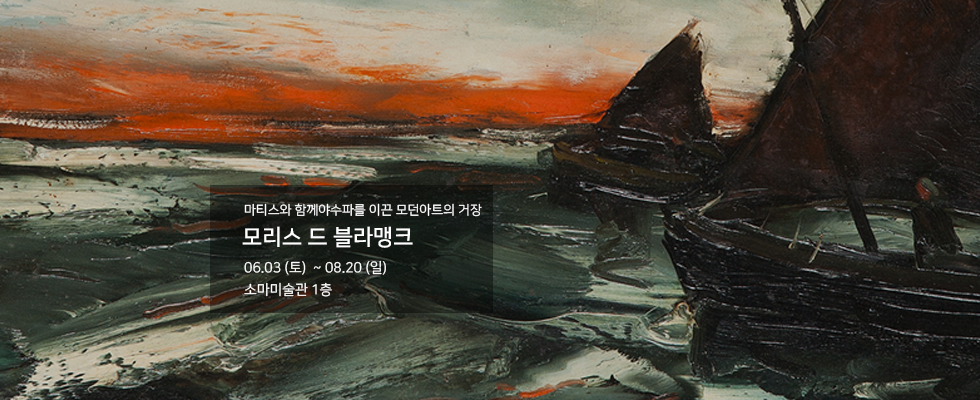
<style>
.page{position:relative;width:980px;height:400px}
.page>*{position:absolute;margin:0}
.t1{font:13px "NanumSquareR";color:#ffffff}
.t2{font:22px "NanumSquareB";color:#ffffff}
.t3{font:14px/22px "NanumSquareR";color:#ffffff}
</style>
<div class="page">
<p class="t1" style="left:244px;top:203px;width:238px;height:14px">마티스와 함께야수파를 이끈 모던아트의 거장</p>
<p class="t2" style="left:242px;top:226px;width:171px;height:22px">모리스 드 블라맹크</p>
<p class="t3" style="left:244px;top:260px;width:142px;height:37px">06.03 (토)  ~ 08.20 (일) <br>소마미술관 1층</p>
</div>
